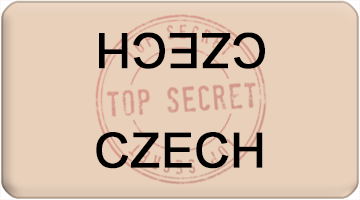
<style>
.page{position:relative;width:360px;height:200px;background:#e8d0bb}
.page>*{position:absolute;margin:0}
.t1{font:48px "ArialMT";color:#000000;font-weight:bold}
</style>
<div class="page">
<p class="t1" style="left:99px;top:32px;width:166px;height:37px;rotate:180deg">CZECH</p>
<p class="t1" style="left:96px;top:132px;width:167px;height:37px">CZECH</p>
</div>
